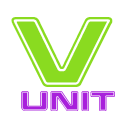
<style>
.page{position:relative;width:128px;height:128px;background:#ffffff}
.page>*{position:absolute;margin:0}
.t1{font:100px "FederationStarFleet";color:#8adb20}
.t2{font:40px "FederationStarFleet";color:#a820db}
</style>
<div class="page">
<p class="t1" style="left:11px;top:17px;width:102px;height:70px">V</p>
<p class="t2" style="left:21px;top:91px;width:94px;height:20px">unit</p>
</div>
